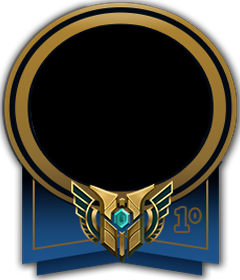
<style>
.page{position:relative;width:240px;height:280px;background:#000000}
.page>*{position:absolute;margin:0}
.t1{font:36px "SourceSansPro-Black";color:#13375f;scale:0.8 1}
</style>
<div class="page">
<p class="t1" style="left:175px;top:208px;width:25px;height:23px">1º</p>
</div>
